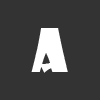
<style>
.page{position:relative;width:100px;height:100px;background:#333333}
.page>*{position:absolute;margin:0}
.t1{font:58.3px "ShowcardGothic-Reg";color:#ffffff}
</style>
<div class="page">
<p class="t1" style="left:31px;top:28px;width:37px;height:45px">a</p>
</div>
